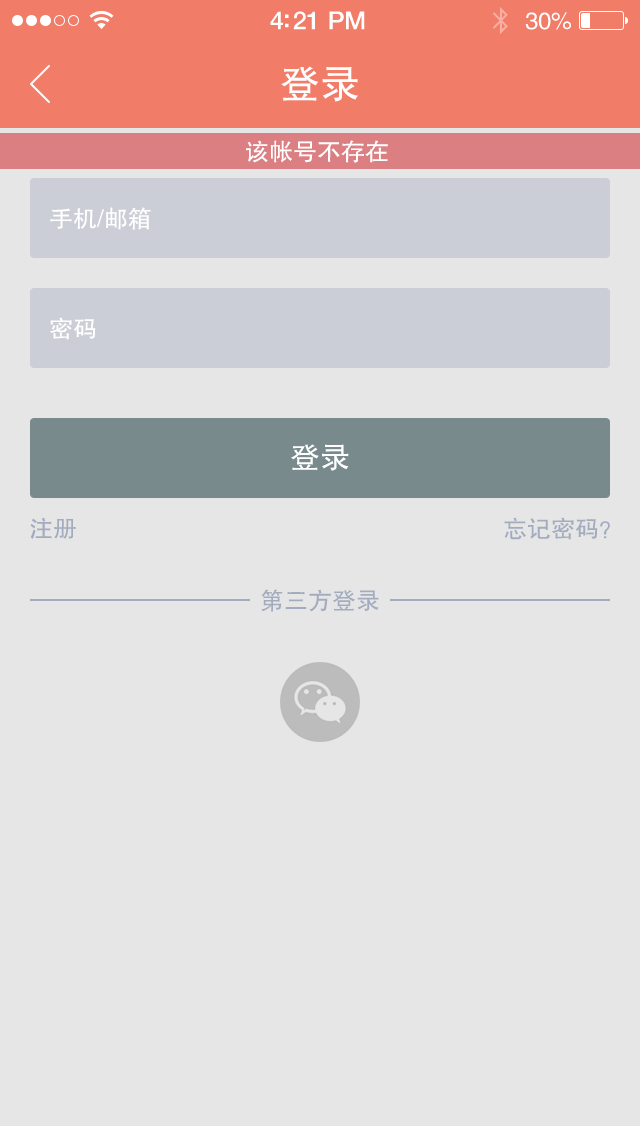
<style>
.page{position:relative;width:640px;height:1136px;background:#e6e6e6}
.page>*{position:absolute;margin:0}
.t1{font:25px "HelveticaNeue-Medium";letter-spacing:-0.02em;color:#ffffff}
.t2{font:24px "FZHTJW--GB1-0";letter-spacing:-0.02em;color:#ffffff}
.t3{font:40px "FZHTJW--GB1-0";color:#ffffff}
.t4{font:24px "FZHTJW--GB1-0";color:#ffffff}
.t5{font:30px "FZHTJW--GB1-0";color:#ffffff}
.t6{font:24px "FZHTJW--GB1-0";color:#a3abbe}
</style>
<div class="page">
<p class="t1" style="left:270px;top:11px;width:95px;height:19px">4:21 PM</p>
<p class="t2" style="left:525px;top:12px;width:46px;height:18px">30%</p>
<p class="t3" style="left:281px;top:66px;width:77px;height:36px">登录</p>
<p class="t4" style="left:246px;top:140px;width:142px;height:23px">该帐号不存在</p>
<p class="t4" style="left:50px;top:207px;width:101px;height:23px">手机/邮箱</p>
<p class="t4" style="left:50px;top:317px;width:46px;height:23px">密码</p>
<p class="t5" style="left:291px;top:444px;width:58px;height:27px">登录</p>
<p class="t6" style="left:30px;top:517px;width:46px;height:22px">注册</p>
<p class="t6" style="left:504px;top:517px;width:106px;height:23px">忘记密码？</p>
<p class="t6" style="left:261px;top:589px;width:118px;height:23px">第三方登录</p>
</div>
